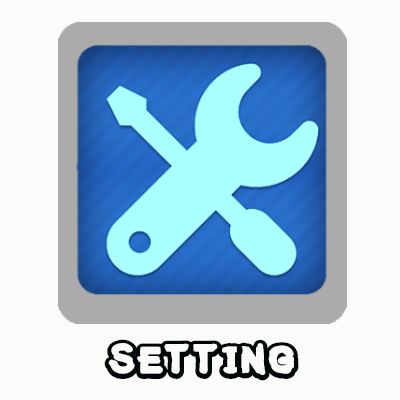
<style>
.page{position:relative;width:400px;height:400px;background:#fbfbf9}
.page>*{position:absolute;margin:0}
.t1{font:60px "The-Kids-Mraker-Regular";color:#000707}
</style>
<div class="page">
<p class="t1" style="left:104px;top:339px;width:195px;height:42px">setting</p>
</div>
